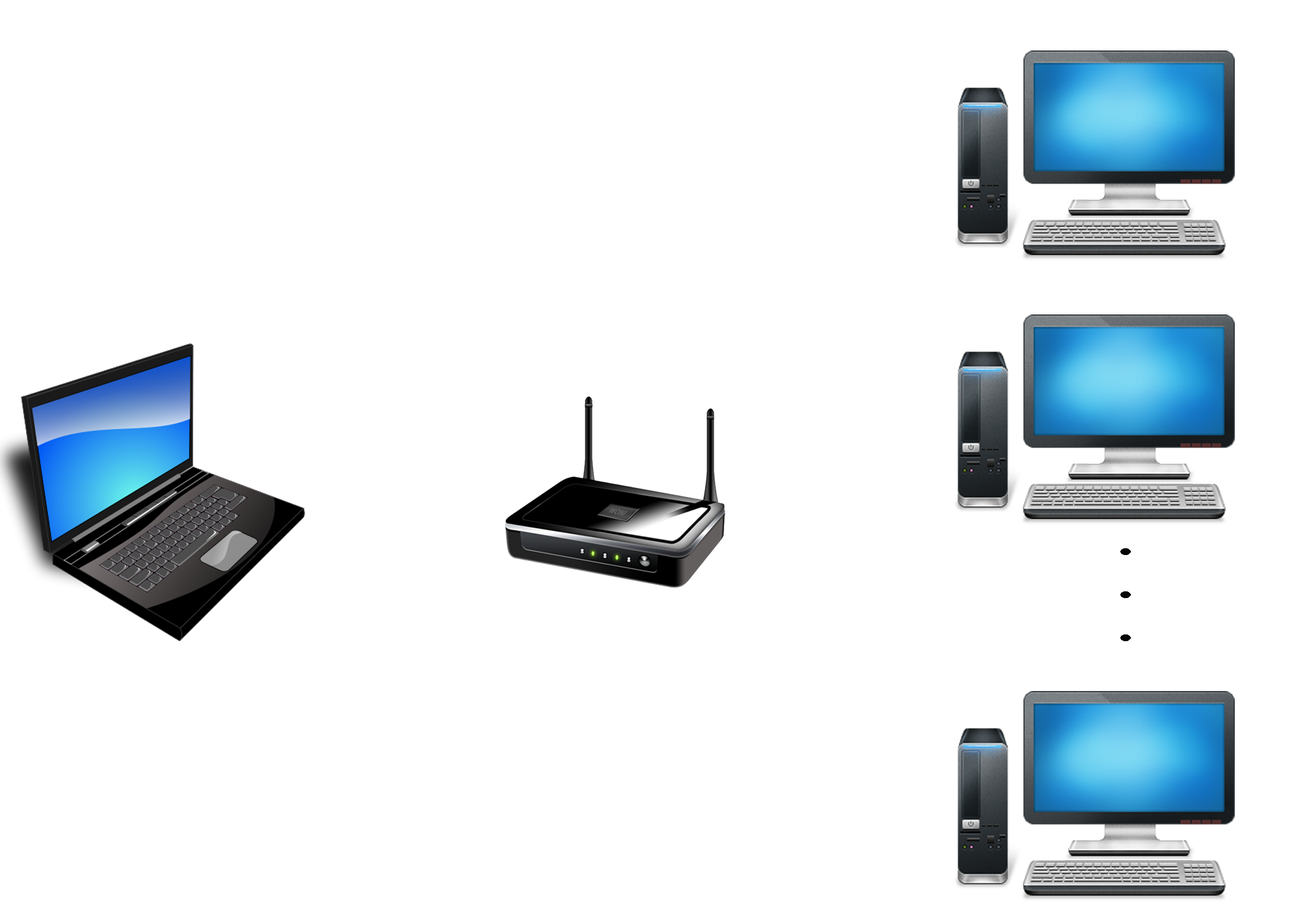
<style>
.page{position:relative;width:1292px;height:923px;background:#ffffff}
.page>*{position:absolute;margin:0}
.t1{font:35.9px "LatinWide";color:#060606}
</style>
<div class="page">
<p class="t1" style="left:1120px;top:548px;width:11px;height:93px;text-align:center">.<br>.<br>.</p>
</div>
